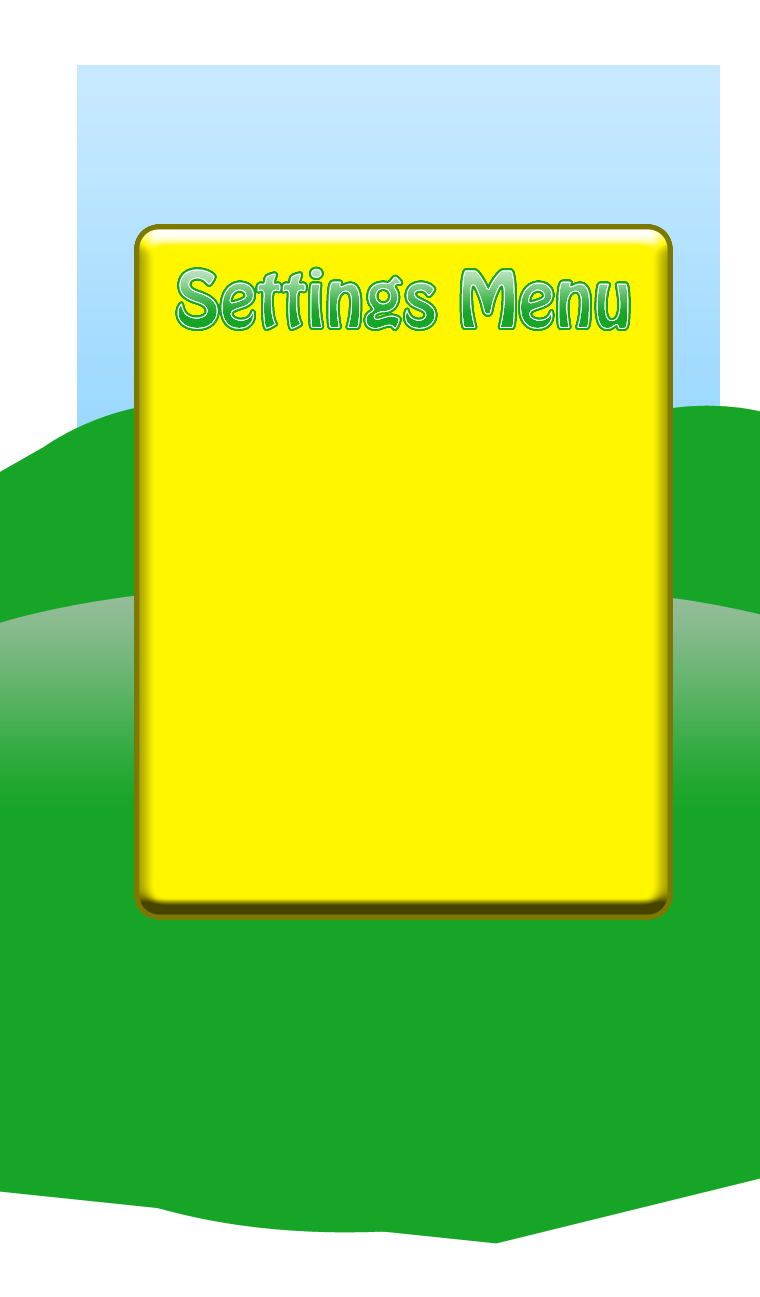
<style>
.page{position:relative;width:760px;height:1297px;background:#fff600}
.page>*{position:absolute;margin:0}
.t1{font:69.4px "HoboStd"}
</style>
<div class="page">
<p class="t1" style="left:177px;top:268px;width:452px;height:61px">Settings Menu</p>
</div>
